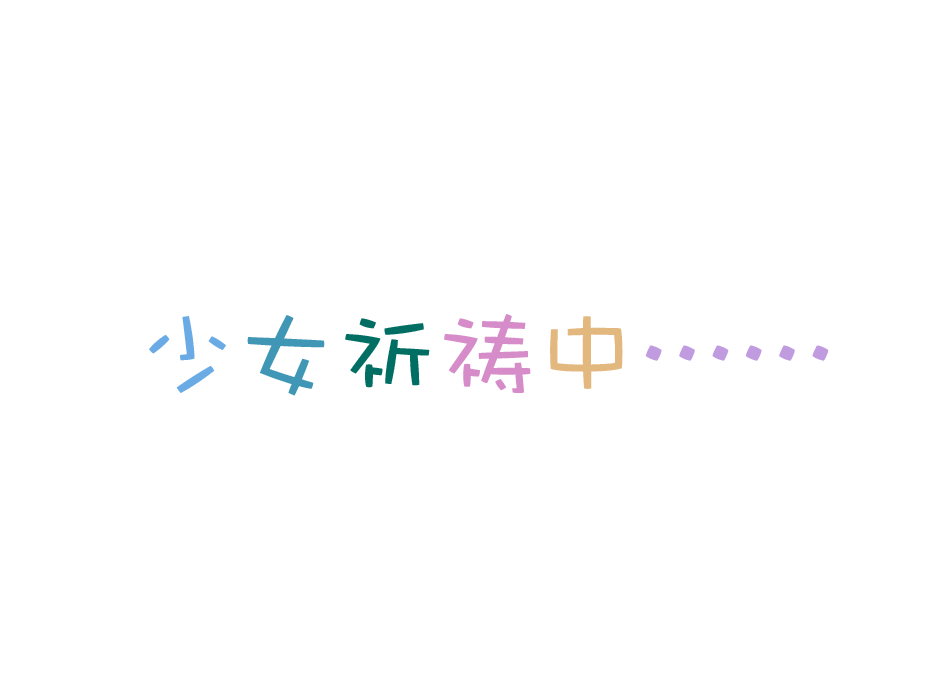
<style>
.page{position:relative;width:935px;height:700px;background:#ffffff}
.page>*{position:absolute;margin:0}
.t1{font:100px "DFWaWaSC-W5";color:#c19bdf}
.t2{font:100px "DFWaWaSC-W5";color:#6babe5}
.t3{font:100px "DFWaWaSC-W5";color:#3f97b5}
.t4{font:100px "DFWaWaSC-W5";color:#006e63}
.t5{font:100px "DFWaWaSC-W5";color:#d58cc8}
.t6{font:100px "DFWaWaSC-W5";color:#e2b87f}
</style>
<div class="page">
<p class="t1" style="left:149px;top:314px;width:680px;height:82px"><span class="t2">少</span><span class="t3">女</span><span class="t4">祈</span><span class="t5">祷</span><span class="t6">中</span>……</p>
</div>
